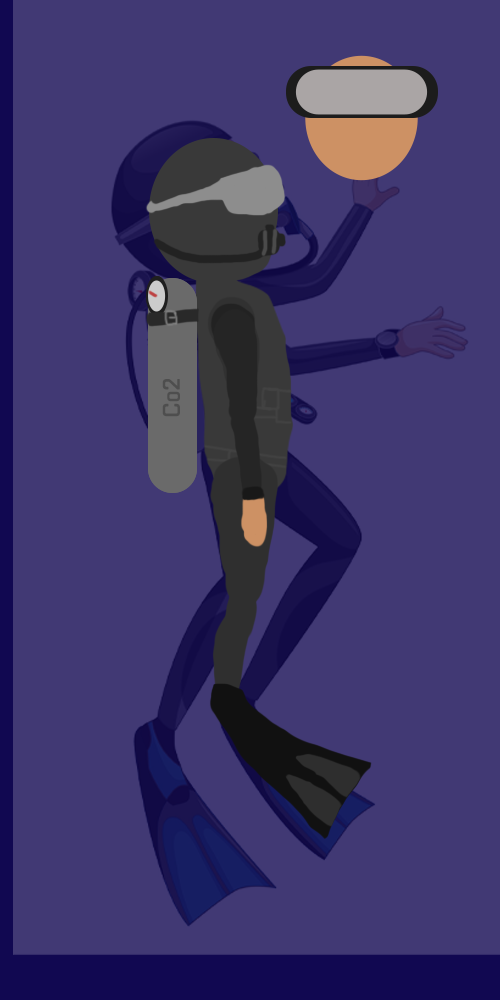
<style>
.page{position:relative;width:500px;height:1000px;background:#413974}
.page>*{position:absolute;margin:0}
.t1{font:24px "TTLakesCondensed-DemiBold";letter-spacing:-0.025em;color:#4e4e4e}
</style>
<div class="page">
<p class="t1" style="left:162px;top:379px;width:18px;height:38px;rotate:-90deg">Co2</p>
</div>
